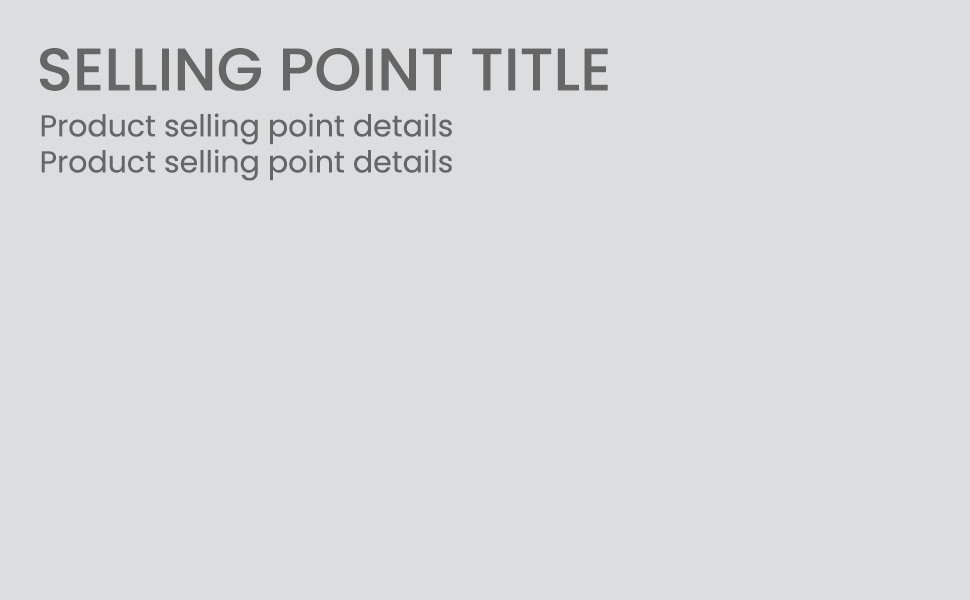
<style>
.page{position:relative;width:970px;height:600px;background:#dcdddf}
.page>*{position:absolute;margin:0}
.t1{font:60px "Poppins-Medium";color:#666666;text-transform:uppercase}
.t2{font:30px "Poppins-Regular";color:#666666}
</style>
<div class="page">
<p class="t1" style="left:40px;top:48px;width:568px;height:43px">Selling point title</p>
<p class="t2" style="left:41px;top:113px;width:411px;height:68px">Product selling point details<br>Product selling point details</p>
</div>
